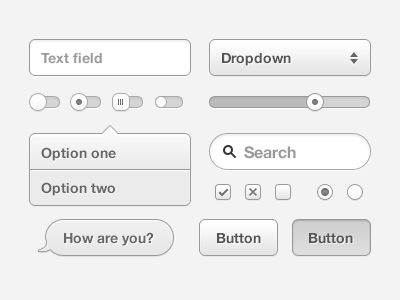
<style>
.page{position:relative;width:400px;height:300px;background:#f3f3f3}
.page>*{position:absolute;margin:0}
.t1{font:14px "HelveticaNeue-Bold";color:#999999}
.t2{font:14px "HelveticaNeue-Bold";color:#555555}
.t3{font:14px/35px "HelveticaNeue-Bold";color:#666666}
.t4{font:16px "HelveticaNeue-Bold";color:#999999}
.t5{font:14px "HelveticaNeue-Bold";color:#666666}
</style>
<div class="page">
<p class="t1" style="left:41px;top:53px;width:61px;height:11px">Text field</p>
<p class="t2" style="left:222px;top:53px;width:69px;height:13px">Dropdown</p>
<p class="t3" style="left:41px;top:147px;width:75px;height:49px">Option one<br>Option two</p>
<p class="t4" style="left:244px;top:146px;width:52px;height:13px">Search</p>
<p class="t5" style="left:64px;top:232px;width:90px;height:14px">How are you?</p>
<p class="t2" style="left:217px;top:233px;width:44px;height:11px">Button</p>
<p class="t2" style="left:309px;top:233px;width:44px;height:11px">Button</p>
</div>
